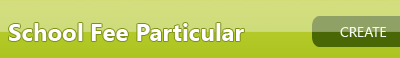
<style>
.page{position:relative;width:400px;height:58px}
.page>*{position:absolute;margin:0}
.t1{font:24px "SegoeUI-Bold";color:#fefefe}
.t2{font:14px "SegoeUI";color:#f6f7f1}
</style>
<div class="page">
<p class="t1" style="left:9px;top:23px;width:235px;height:18px">School Fee Particular</p>
<p class="t2" style="left:340px;top:27px;width:47px;height:10px">CREATE</p>
</div>
